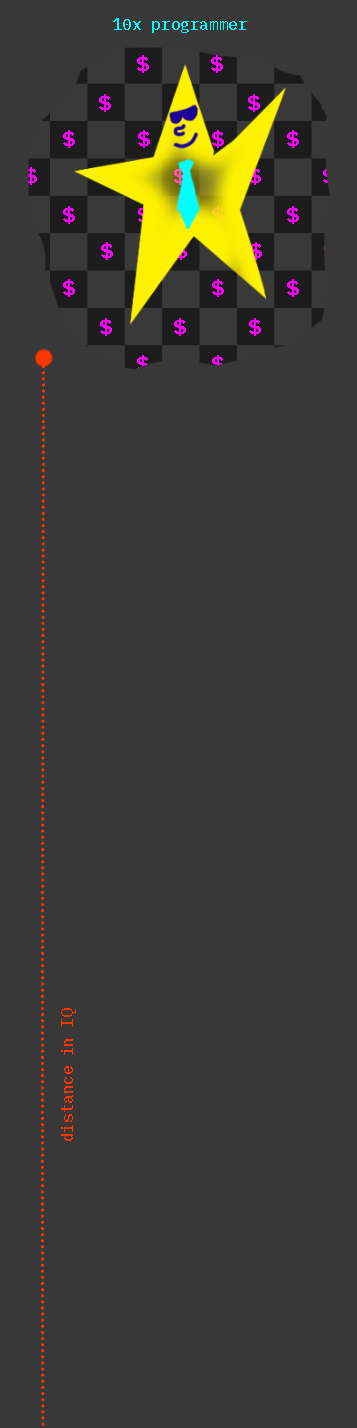
<style>
.page{position:relative;width:357px;height:1428px;background:#383838}
.page>*{position:absolute;margin:0}
.t1{font:16px "IBMPlexMono-Medium";letter-spacing:0.005em;color:#00ffff}
.t2{font:16px "IBMPlexMono-Medium";letter-spacing:0.005em;color:#fe3700}
</style>
<div class="page">
<p class="t1" style="left:113px;top:18px;width:134px;height:15px">10x programmer</p>
<p class="t2" style="left:61px;top:1008px;width:15px;height:133px;rotate:-90deg">distance in IQ</p>
</div>
